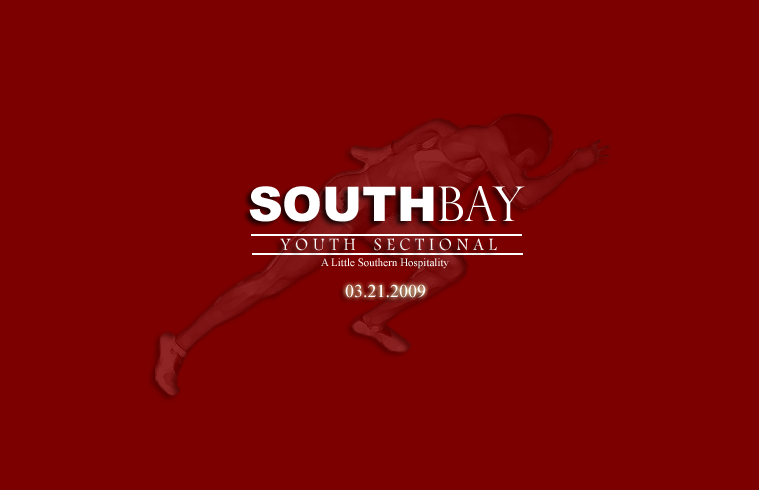
<style>
.page{position:relative;width:759px;height:490px;background:#7c0000}
.page>*{position:absolute;margin:0}
.t1{font:48px "Arial-Black";color:#ffffff}
.t2{font:48px "PerpetuaTitlingMT-Light";color:#ffffff}
.t3{font:18px "FootlightMTLight";color:#fefefe}
.t4{font:11px "TimesNewRomanPSMT";color:#fefefe}
.t5{font:18px "TimesNewRomanPSMT";color:#fdfdfd}
</style>
<div class="page">
<p class="t1" style="left:249px;top:186px;width:276px;height:36px">SOUTH<span class="t2">BAY</span></p>
<p class="t3" style="left:280px;top:238px;width:217px;height:13px">Y O U T H    S E C T I O N A L</p>
<p class="t4" style="left:321px;top:258px;width:128px;height:11px">A Little Southern Hospitality</p>
<p class="t5" style="left:345px;top:284px;width:81px;height:14px">03.21.2009</p>
</div>
